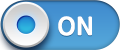
<style>
.page{position:relative;width:120px;height:50px}
.page>*{position:absolute;margin:0}
.t1{font:23.8px "NanumGothicOTFExtraBold";color:#ffffff}
</style>
<div class="page">
<p class="t1" style="left:58px;top:16px;width:34px;height:20px">ON</p>
</div>
